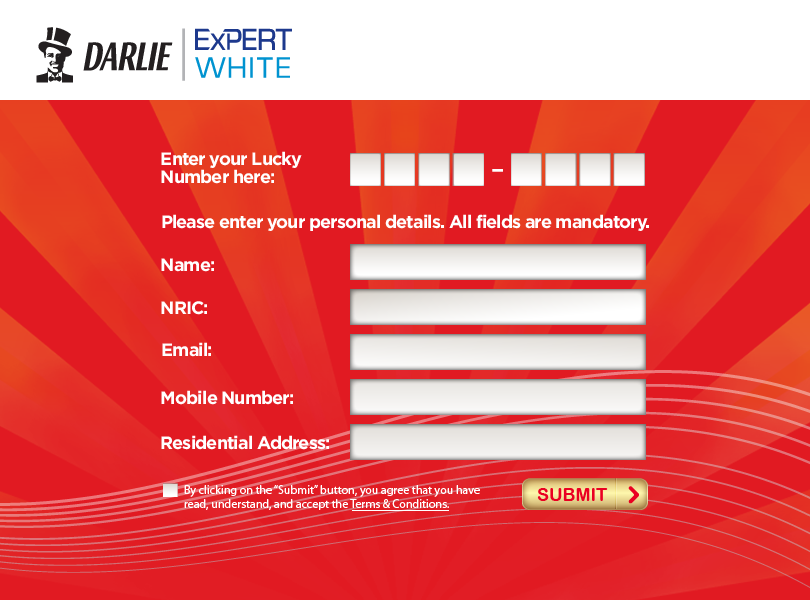
<style>
.page{position:relative;width:810px;height:600px;background:#e11a22}
.page>*{position:absolute;margin:0}
.t1{font:18px/18px "Gotham-Bold";letter-spacing:-0.05em;color:#ffffff}
.t2{font:43.5px "MyriadPro-Regular";color:#ffffff}
.t3{font:18px "Gotham-Bold";letter-spacing:-0.05em;color:#ffffff}
.t4{font:12px "MyriadPro-Regular";color:#ffffff}
.t5{font:18px "ArialRoundedMTBold";color:#ea0022}
</style>
<div class="page">
<p class="t1" style="left:161px;top:151px;width:141px;height:33px">Enter your Lucky Number here:</p>
<p class="t2" style="left:492px;top:169px;width:11px;height:3px">-</p>
<p class="t3" style="left:162px;top:214px;width:487px;height:17px">Please enter your personal details. All fields are mandatory.</p>
<p class="t3" style="left:161px;top:258px;width:53px;height:14px">Name:</p>
<p class="t3" style="left:161px;top:301px;width:46px;height:14px">NRIC:</p>
<p class="t3" style="left:162px;top:342px;width:49px;height:15px">Email:</p>
<p class="t3" style="left:161px;top:390px;width:132px;height:15px">Mobile Number:</p>
<p class="t3" style="left:161px;top:435px;width:168px;height:15px">Residential Address:</p>
<p class="t4" style="left:184px;top:484px;width:296px;height:26px">By clicking on the “Submit” button, you agree that you have read, understand, and accept the Terms &amp; Conditions.</p>
<p class="t5" style="left:537px;top:488px;width:71px;height:13px">SUBMIT</p>
</div>
